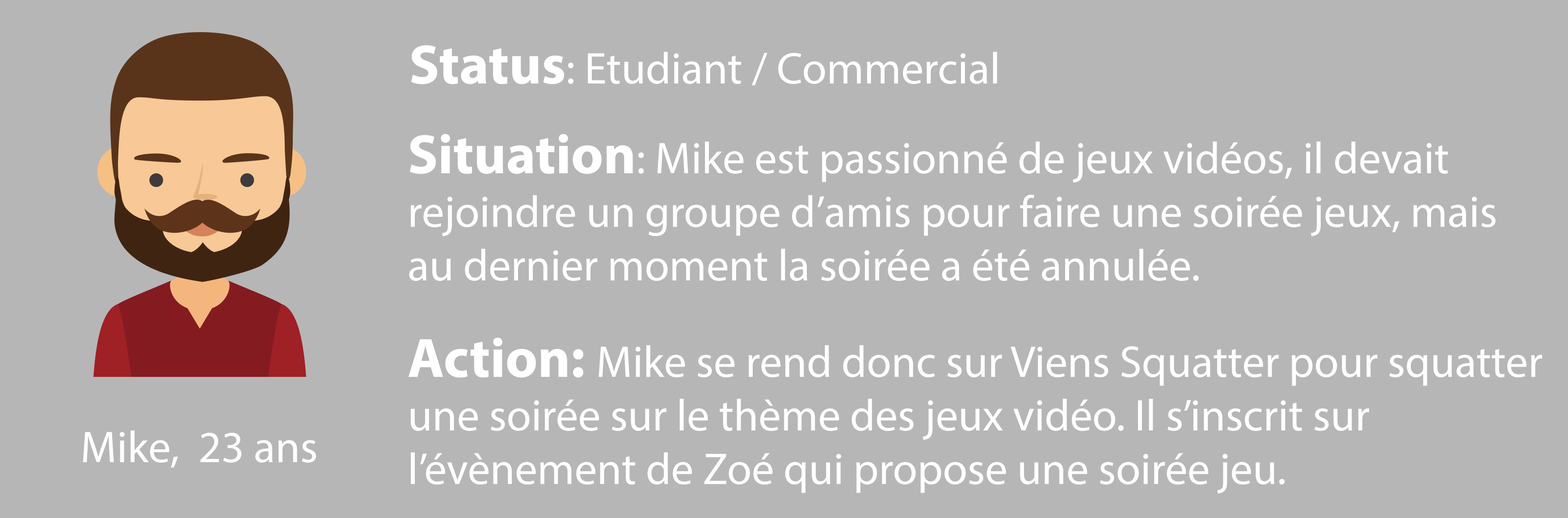
<style>
.page{position:relative;width:1568px;height:518px;background:#b6b6b6}
.page>*{position:absolute;margin:0}
.t1{font:44.7px "MyriadPro-Regular";color:#ffffff}
.t2{font:55.9px "MyriadPro-Bold";color:#ffffff}
</style>
<div class="page">
<p class="t1" style="left:411px;top:45px;width:586px;height:40px"><span class="t2">Status</span>: Etudiant / Commercial</p>
<p class="t1" style="left:409px;top:134px;width:1087px;height:147px"><span class="t2">Situation</span>: Mike est passionné de jeux vidéos, il devait <br>rejoindre un groupe d’amis pour faire une soirée jeux, mais <br>au dernier moment la soirée a été annulée.</p>
<p class="t1" style="left:409px;top:338px;width:1133px;height:156px"><span class="t2">Action: </span>Mike se rend donc sur Viens Squatter pour squatter<br>une soirée sur le thème des jeux vidéo. Il s’inscrit sur <br>l’évènement de Zoé qui propose une soirée jeu.</p>
<p class="t1" style="left:83px;top:431px;width:233px;height:37px">Mike,  23 ans</p>
</div>
